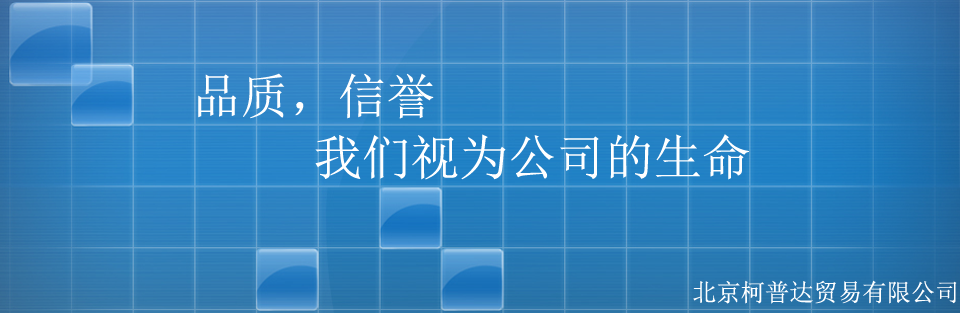
<style>
.page{position:relative;width:960px;height:313px}
.page>*{position:absolute;margin:0}
.t1{font:48.6px "SimSun";color:#ffffff}
.t2{font:24.3px "SimSun";color:#ffffff}
</style>
<div class="page">
<p class="t1" style="left:198px;top:73px;width:236px;height:46px">品质，信誉</p>
<p class="t1" style="left:315px;top:134px;width:434px;height:46px">我们视为公司的生命</p>
<p class="t2" style="left:693px;top:280px;width:264px;height:24px">北京柯普达贸易有限公司</p>
</div>
